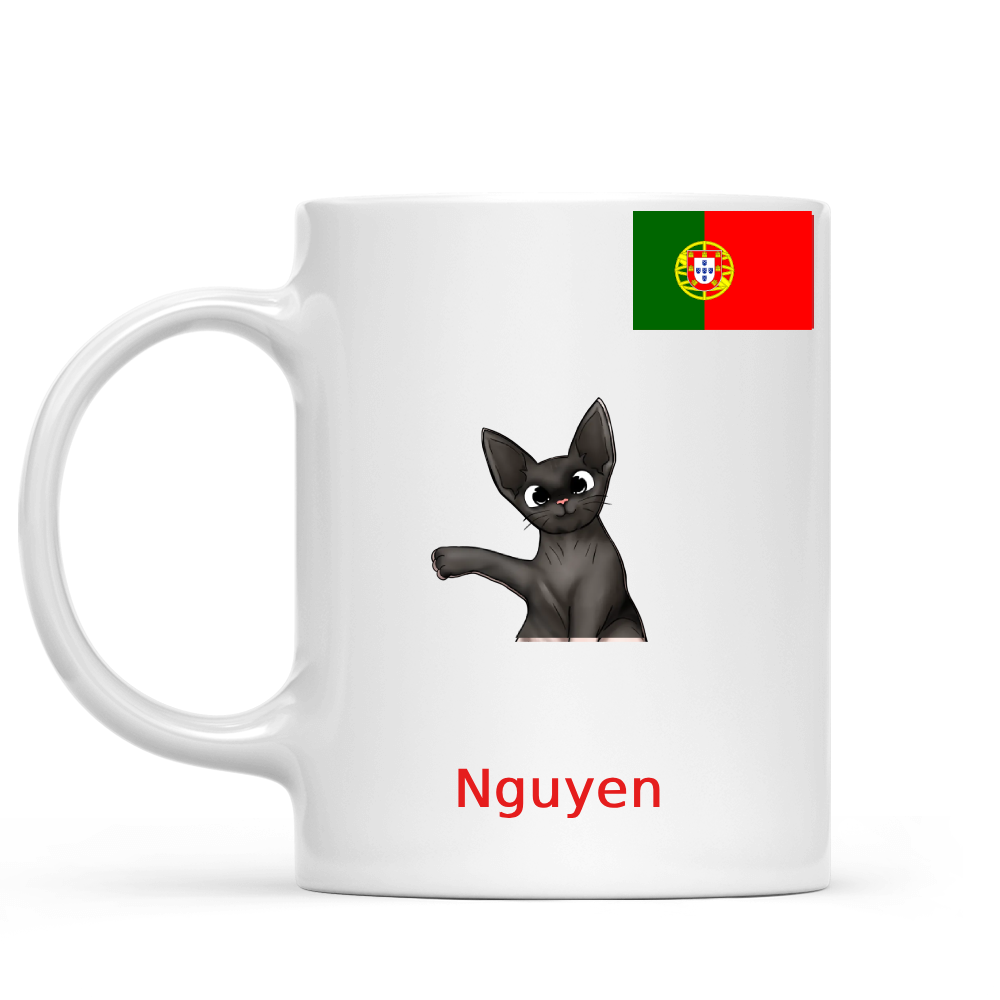
<style>
.page{position:relative;width:1000px;height:1000px;background:#ffffff}
.page>*{position:absolute;margin:0}
.t1{font:52.4px "DejaVuSans";color:#e51d1d;font-weight:bold}
</style>
<div class="page">
<p class="t1" style="left:458px;top:768px;width:202px;height:50px">Nguyen</p>
</div>
